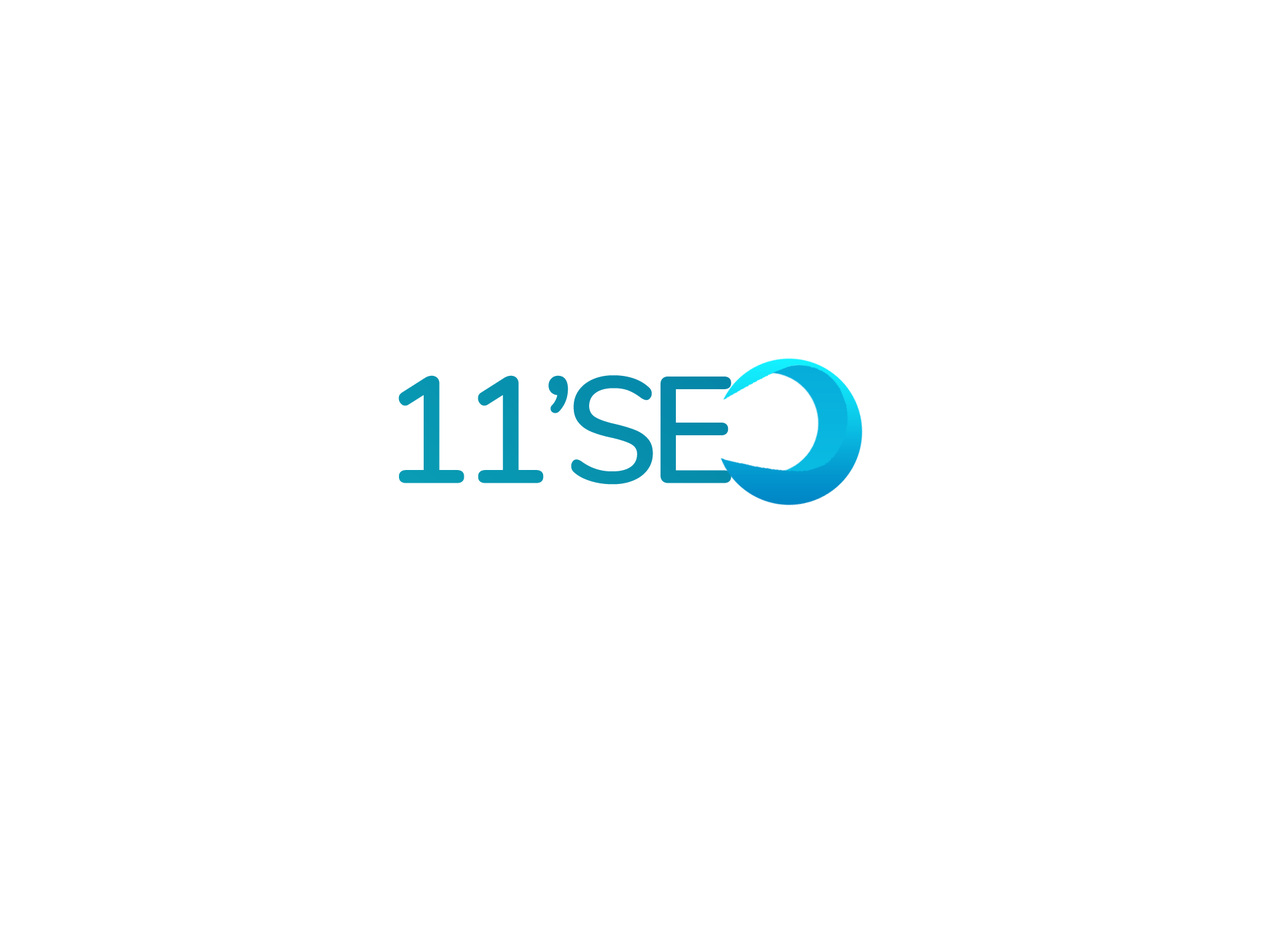
<style>
.page{position:relative;width:1261px;height:946px;background:#ffffff}
.page>*{position:absolute;margin:0}
.t1{font:150.9px "Nunito-SemiBold";letter-spacing:-0.075em;color:#078fad}
</style>
<div class="page">
<p class="t1" style="left:398px;top:375px;width:333px;height:109px">11’SE</p>
</div>
